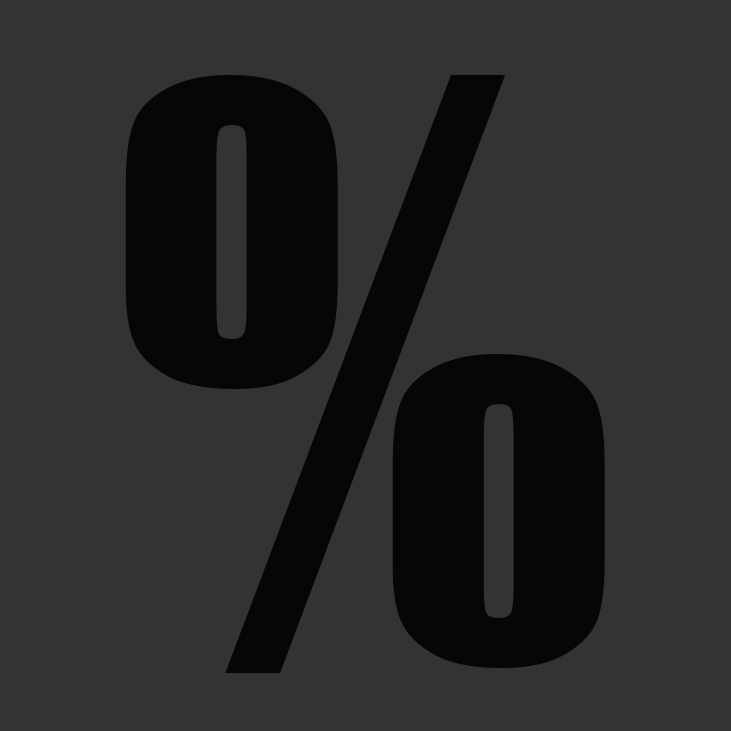
<style>
.page{position:relative;width:731px;height:731px;background:#333333}
.page>*{position:absolute;margin:0}
.t1{font:728.2px "Impact";color:#060606}
</style>
<div class="page">
<p class="t1" style="left:125px;top:75px;width:480px;height:598px">%</p>
</div>
